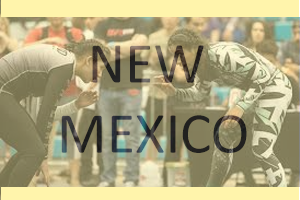
<style>
.page{position:relative;width:300px;height:200px}
.page>*{position:absolute;margin:0}
.t1{font:58.3px "Calibri";color:#2d2d2c}
</style>
<div class="page">
<p class="t1" style="left:61px;top:45px;width:186px;height:108px;text-align:center">NEW <br>MEXICO</p>
</div>
